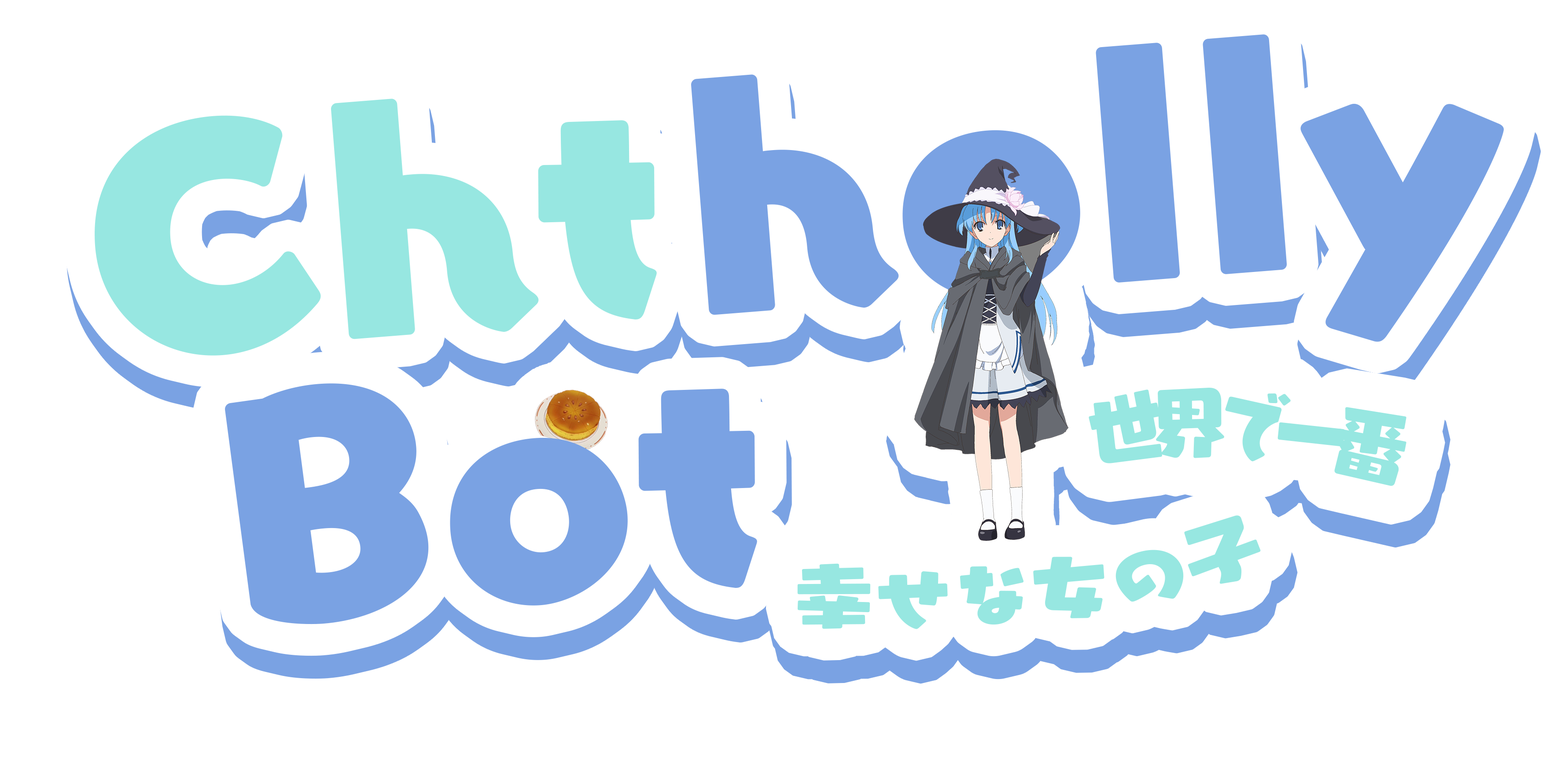
<style>
.page{position:relative;width:1568px;height:760px;background:#ffffff}
.page>*{position:absolute;margin:0}
.t1{font:275.1px "YurukaStd-UB";color:#7aa2e3}
.t2{font:275.1px "YurukaStd-UB";color:#97e7e1}
.t3{font:75.2px "YurukaStd-UB";letter-spacing:-0.225em;color:#97e7e1}
.t4{font:68.8px "YurukaStd-UB";color:#97e7e1;scale:1.16 1}
</style>
<div class="page">
<p class="t1" style="left:691px;top:34px;width:813px;height:308px;rotate:-5deg">holly</p>
<p class="t2" style="left:95px;top:99px;width:562px;height:257px;rotate:-5deg">Cht</p>
<p class="t1" style="left:225px;top:383px;width:532px;height:242px;rotate:-5deg">Bot</p>
<p class="t3" style="left:1089px;top:388px;width:317px;height:98px;rotate:5deg">世界で一番</p>
<p class="t4" style="left:797px;top:515px;width:464px;height:114px;rotate:-11deg">幸せな女の子</p>
</div>
